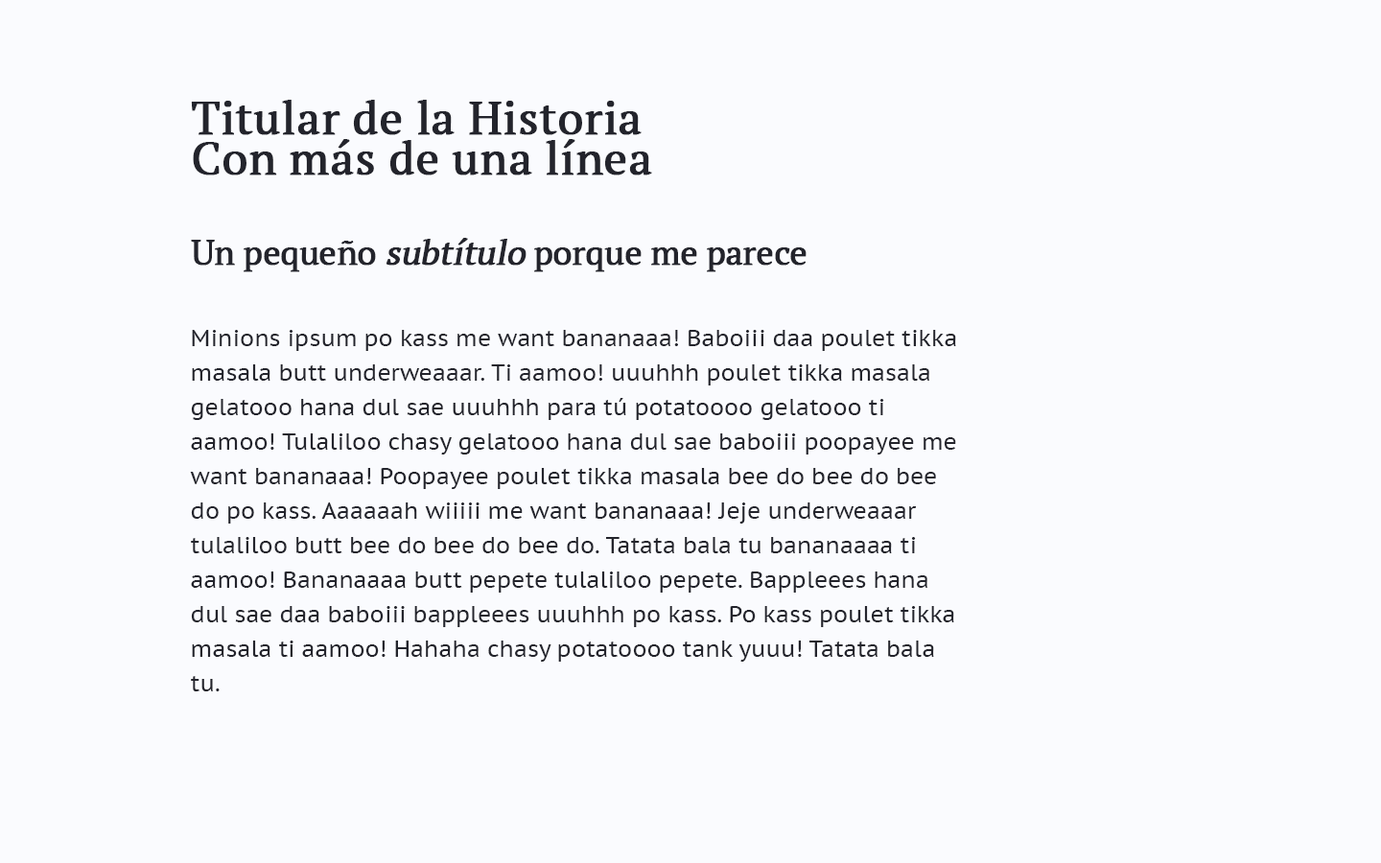
<style>
.page{position:relative;width:1381px;height:863px;background:#fafbfe}
.page>*{position:absolute;margin:0}
.t1{font:46px/40.3px "PTSerif-Regular";color:#23242c;font-weight:bold}
.t2{font:34.5px "PTSerif-Regular";letter-spacing:-0.025em;color:#23242c;font-weight:bold}
.t3{font:34.5px "PTSerif-Regular";letter-spacing:-0.025em;color:#23242c;font-weight:bold;font-style:italic}
.t4{font:23px/34.5px "PTSans-Caption";color:#23242c}
</style>
<div class="page">
<p class="t1" style="left:191px;top:100px;width:461px;height:76px">Titular de la Historia <br>Con más de una línea</p>
<p class="t2" style="left:191px;top:238px;width:616px;height:34px">Un pequeño <span class="t3">subtítulo</span> porque me parece</p>
<p class="t4" style="left:190px;top:330px;width:766px;height:362px">Minions ipsum po kass me want bananaaa! Baboiii daa poulet tikka masala butt underweaaar. Ti aamoo! uuuhhh poulet tikka masala gelatooo hana dul sae uuuhhh para tú potatoooo gelatooo ti aamoo! Tulaliloo chasy gelatooo hana dul sae baboiii poopayee me want bananaaa! Poopayee poulet tikka masala bee do bee do bee do po kass. Aaaaaah wiiiii me want bananaaa! Jeje underweaaar tulaliloo butt bee do bee do bee do. Tatata bala tu bananaaaa ti aamoo! Bananaaaa butt pepete tulaliloo pepete. Bappleees hana dul sae daa baboiii bappleees uuuhhh po kass. Po kass poulet tikka masala ti aamoo! Hahaha chasy potatoooo tank yuuu! Tatata bala tu.</p>
</div>
